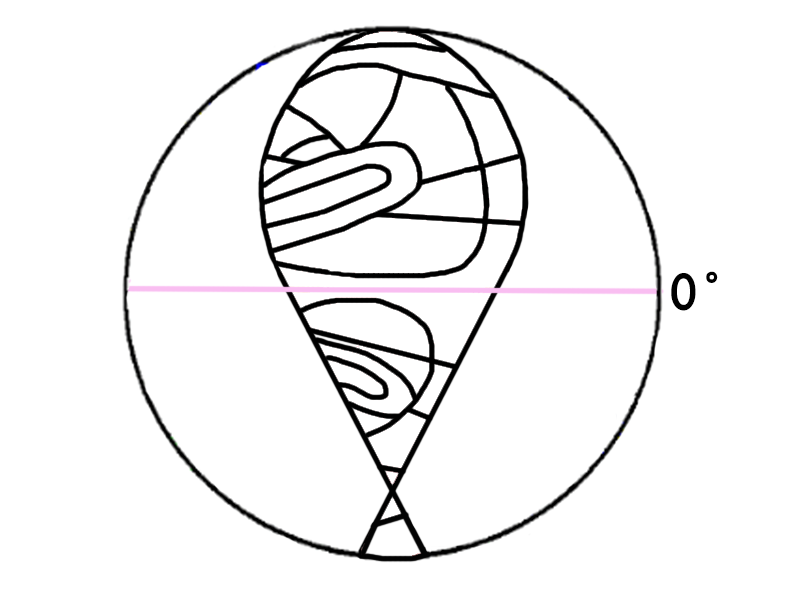
<style>
.page{position:relative;width:800px;height:600px;background:#ffffff}
.page>*{position:absolute;margin:0}
.t1{font:45.8px "HGPSoeiKakugothicUB";letter-spacing:0.13em;color:#000000}
.t2{font:250px "Corporate-Logo-Bold";letter-spacing:0.13em;color:#000000}
</style>
<div class="page">
<p class="t1" style="left:671px;top:271px;width:47px;height:40px">0°<span class="t2">度</span></p>
</div>
